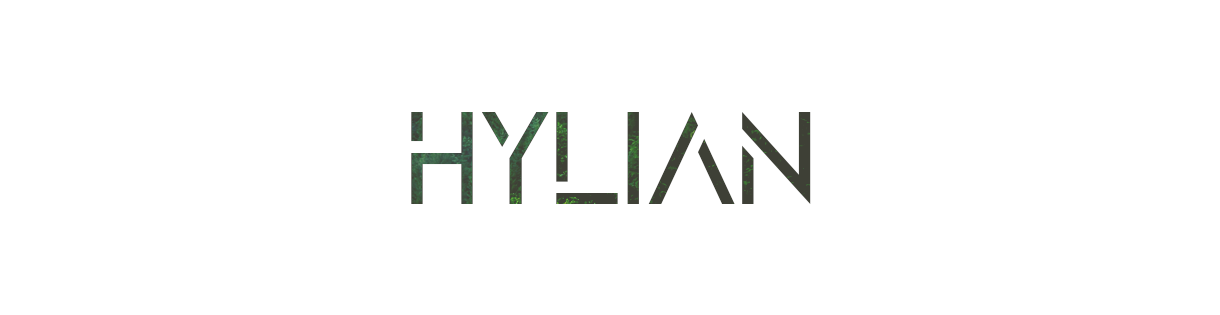
<style>
.page{position:relative;width:1220px;height:315px;background:#ffffff}
.page>*{position:absolute;margin:0}
.t1{font:216.3px "ZELDA";color:#3e4036}
</style>
<div class="page">
<p class="t1" style="left:411px;top:112px;width:400px;height:92px">HYLIAN</p>
</div>
